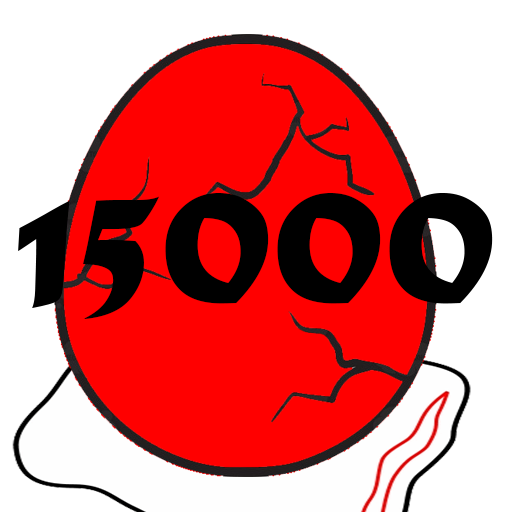
<style>
.page{position:relative;width:512px;height:512px;background:#ff0000}
.page>*{position:absolute;margin:0}
.t1{font:170.8px "MaturaMTScriptCapitals";color:#000000}
</style>
<div class="page">
<p class="t1" style="left:18px;top:193px;width:475px;height:126px">15000</p>
</div>
